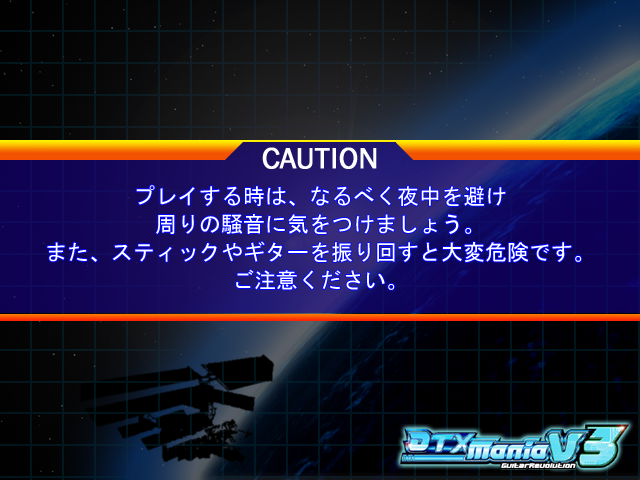
<style>
.page{position:relative;width:640px;height:480px}
.page>*{position:absolute;margin:0}
.t1{font:30px "FranklinGothic-Book";color:#fefefd;font-weight:bold}
.t2{font:22px/28px "MS-Gothic";color:#fefefd;font-weight:bold}
</style>
<div class="page">
<p class="t1" style="left:262px;top:147px;width:115px;height:22px">CAUTION</p>
<p class="t2" style="left:47px;top:185px;width:535px;height:105px;text-align:center">プレイする時は、なるべく夜中を避け<br>周りの騒音に気をつけましょう。<br>また、スティックやギターを振り回すと大変危険です。<br>ご注意ください。</p>
</div>
